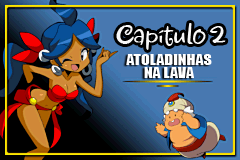
<style>
.page{position:relative;width:240px;height:160px}
.page>*{position:absolute;margin:0}
.t1{font:32px "Jewels";color:#f8f8f8;scale:0.95 1}
.t2{font:14.2px "Impact";color:#ffffff;scale:1.13 1}
</style>
<div class="page">
<p class="t1" style="left:116px;top:23px;width:110px;height:27px">Capítulo 2</p>
<p class="t2" style="left:126px;top:54px;width:86px;height:11px">ATOLADINHAS</p>
<p class="t2" style="left:144px;top:67px;width:50px;height:11px">NA LAVA</p>
</div>
